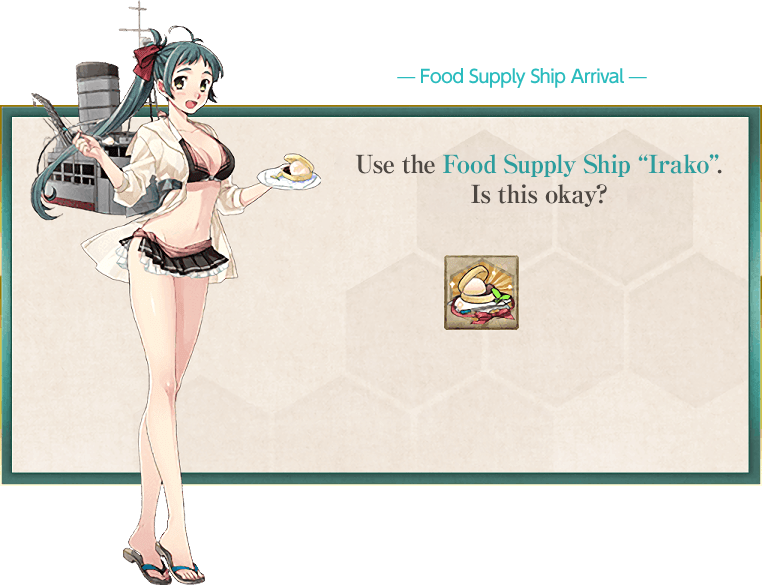
<style>
.page{position:relative;width:762px;height:585px;background:#ffffff}
.page>*{position:absolute;margin:0}
.t1{font:18px "UDShinGoPro-Medium";letter-spacing:-0.04em;color:#2bbcbe}
.t2{font:25px "RyuminPro-ExBold";letter-spacing:-0.04em;color:#2b9e9e}
.t3{font:25px "RyuminPro-ExBold";letter-spacing:-0.04em;color:#4d4742}
</style>
<div class="page">
<p class="t1" style="left:397px;top:68px;width:250px;height:20px">— Food Supply Ship Arrival —</p>
<p class="t2" style="left:355px;top:154px;width:367px;height:53px;text-align:center"><span class="t3">Use the </span>Food Supply Ship “Irako”<span class="t3">.<br>Is this okay?</span></p>
</div>
